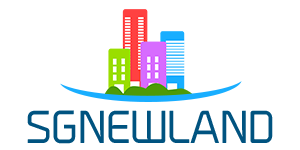
<style>
.page{position:relative;width:300px;height:150px;background:#ffffff}
.page>*{position:absolute;margin:0}
.t1{font:42.9px "UVFPrime";color:#00527f;text-transform:uppercase;scale:0.93 1}
</style>
<div class="page">
<p class="t1" style="left:27px;top:110px;width:246px;height:34px">Sgnewland</p>
</div>
